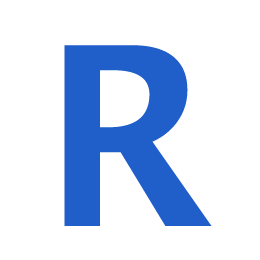
<style>
.page{position:relative;width:260px;height:260px;background:#ffffff}
.page>*{position:absolute;margin:0}
.t1{font:250px "LucidaGrande-Bold";color:#205ec9}
</style>
<div class="page">
<p class="t1" style="left:64px;top:45px;width:148px;height:181px">R</p>
</div>
